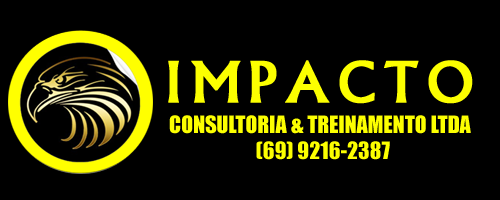
<style>
.page{position:relative;width:500px;height:200px;background:#000000}
.page>*{position:absolute;margin:0}
.t1{font:60px "Narkisim";letter-spacing:0.12em;color:#fcff00;font-weight:bold}
.t2{font:22px "Impact";color:#fcff00}
</style>
<div class="page">
<p class="t1" style="left:168px;top:60px;width:305px;height:44px">IMPACTO</p>
<p class="t2" style="left:169px;top:115px;width:302px;height:19px">CONSULTORIA &amp; TREINAMENTO LTDA</p>
<p class="t2" style="left:256px;top:141px;width:134px;height:19px">(69) 9216-2387</p>
</div>
